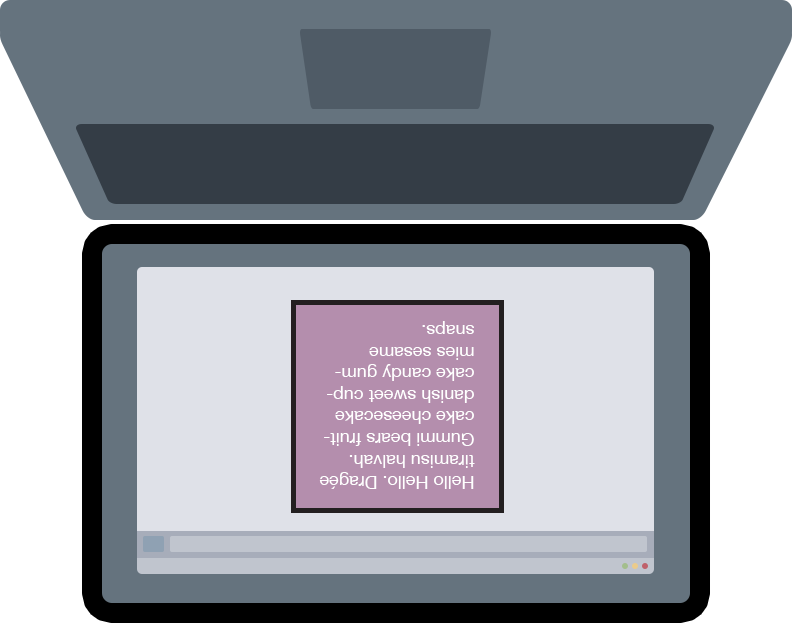
<style>
.page{position:relative;width:792px;height:625px;background:#65737e}
.page>*{position:absolute;margin:0}
.t1{font:18px "HelveticaNeue";color:#ffffff}
</style>
<div class="page">
<p class="t1" style="left:319px;top:321px;width:156px;height:168px;rotate:180deg">Hello Hello. Dragée tiramisu halvah. Gummi bears fruitcake cheesecake danish sweet cupcake candy gummies sesame snaps.</p>
</div>
